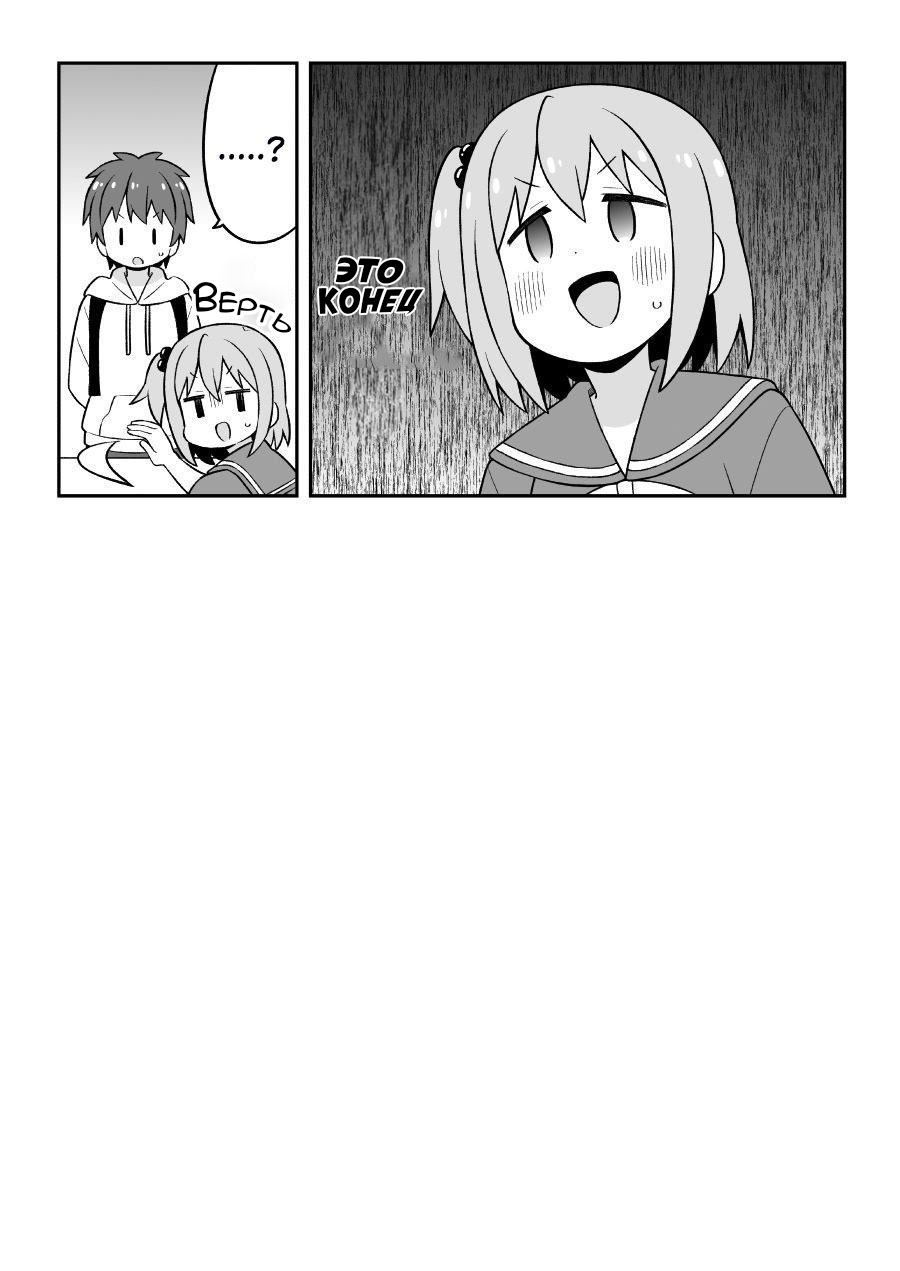
<style>
.page{position:relative;width:900px;height:1271px;background:#ffffff}
.page>*{position:absolute;margin:0}
.t1{font:33px/30px "AvengeanceMArusbyaLiNcE";color:#000000}
.t2{font:30px "AnimeAcev3";color:#000000}
</style>
<div class="page">
<p class="t1" style="left:319px;top:257px;width:105px;height:58px;text-align:center">Это<br>конец</p>
<p class="t2" style="left:193px;top:282px;width:99px;height:51px;rotate:18deg">Верть</p>
</div>
